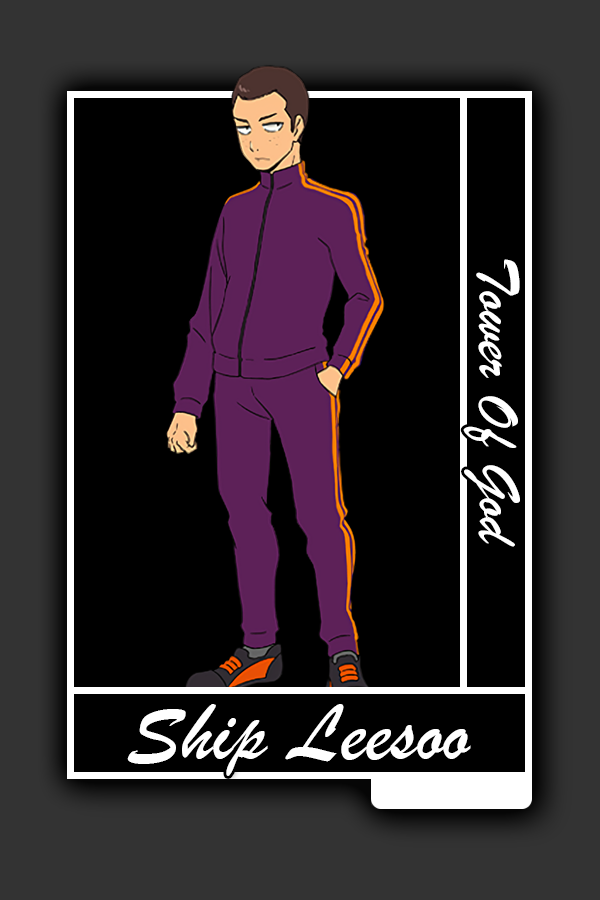
<style>
.page{position:relative;width:600px;height:900px;background:#000000}
.page>*{position:absolute;margin:0}
.t1{font:61.5px "BrushScriptMT";color:#ffffff}
.t2{font:84.8px "BrushScriptMT";color:#ffffff}
</style>
<div class="page">
<p class="t1" style="left:463px;top:259px;width:57px;height:288px;rotate:90deg">Tower Of God</p>
<p class="t2" style="left:127px;top:704px;width:344px;height:72px">Ship Leesoo</p>
</div>
